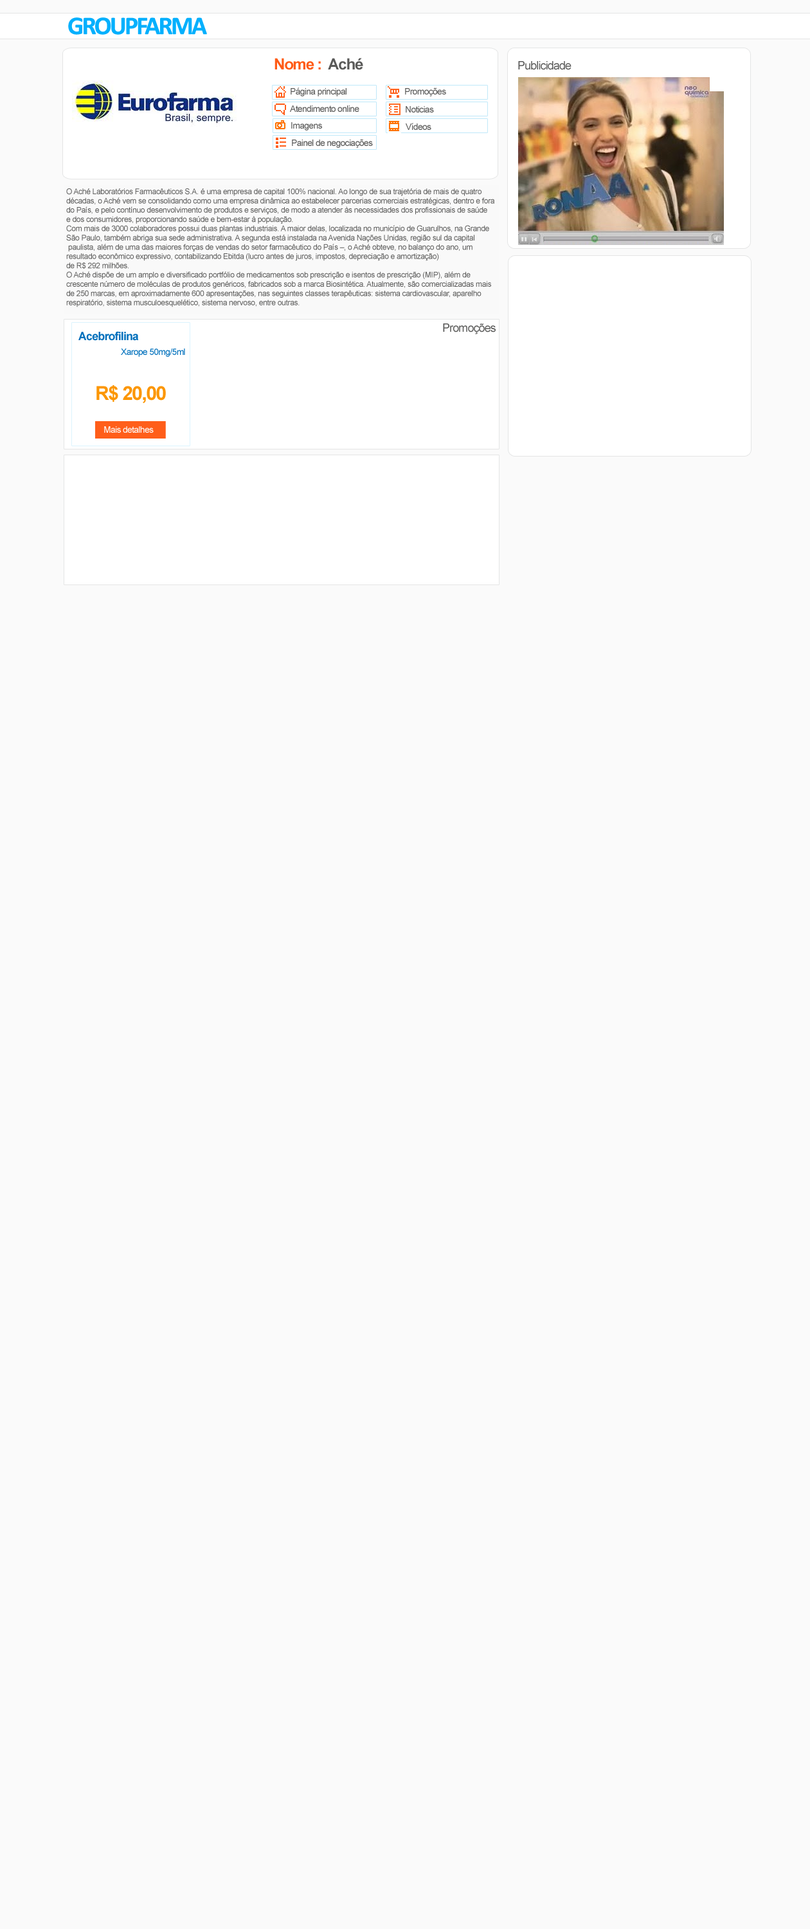
<style>
.page{position:relative;width:810px;height:1929px;background:#fafafa}
.page>*{position:absolute;margin:0}
.t1{font:25.7px "Calibri-Bold";letter-spacing:-0.075em;color:#04b0fd}
.t2{font:15.4px "Arial-BoldMT";letter-spacing:-0.05em;color:#ff5b16}
.t3{font:15.4px "Arial-BoldMT";letter-spacing:-0.05em;color:#595958}
.t4{font:11.6px "ArialMT";letter-spacing:-0.05em;color:#595958}
.t5{font:9px "ArialMT";letter-spacing:-0.05em;color:#595958}
.t6{font:7.7px "ArialMT";letter-spacing:-0.025em;color:#595958}
.t7{font:11.6px "Arial-BoldMT";letter-spacing:-0.05em;color:#0070bc}
.t8{font:9px "ArialMT";letter-spacing:-0.05em;color:#0070bc}
.t9{font:19.3px "Arial-BoldMT";letter-spacing:-0.05em;color:#fc9600}
.t10{font:9px "ArialMT";letter-spacing:-0.05em;color:#fdfdfd}
</style>
<div class="page">
<p class="t1" style="left:68px;top:17px;width:139px;height:18px">GROUPFARMA</p>
<p class="t2" style="left:274px;top:58px;width:89px;height:12px">Nome :<span class="t3">  Aché</span></p>
<p class="t4" style="left:518px;top:61px;width:54px;height:9px">Publicidade</p>
<p class="t5" style="left:291px;top:87px;width:55px;height:9px">Página principal</p>
<p class="t5" style="left:405px;top:87px;width:41px;height:9px">Promoções</p>
<p class="t5" style="left:290px;top:105px;width:69px;height:7px">Atendimento online</p>
<p class="t5" style="left:406px;top:106px;width:28px;height:7px">Noticias</p>
<p class="t5" style="left:291px;top:122px;width:31px;height:8px">Imagens</p>
<p class="t5" style="left:406px;top:123px;width:25px;height:7px">Vídeos</p>
<p class="t5" style="left:292px;top:139px;width:81px;height:9px">Painel de negociações</p>
<p class="t6" style="left:66px;top:188px;width:428px;height:119px">O Aché Laboratórios Farmacêuticos S.A. é uma empresa de capital 100% nacional. Ao longo de sua trajetória de mais de quatro <br>décadas, o Aché vem se consolidando como uma empresa dinâmica ao estabelecer parcerias comerciais estratégicas, dentro e fora <br>do País, e pelo contínuo desenvolvimento de produtos e serviços, de modo a atender às necessidades dos profissionais de saúde <br>e dos consumidores, proporcionando saúde e bem-estar à população.<br>Com mais de 3000 colaboradores possui duas plantas industriais. A maior delas, localizada no município de Guarulhos, na Grande <br>São Paulo, também abriga sua sede administrativa. A segunda está instalada na Avenida Nações Unidas, região sul da capital<br> paulista, além de uma das maiores forças de vendas do setor farmacêutico do País –, o Aché obteve, no balanço do ano, um <br>resultado econômico expressivo, contabilizando Ebitda (lucro antes de juros, impostos, depreciação e amortização) <br>de R$ 292 milhões.<br>O Aché dispõe de um amplo e diversificado portfólio de medicamentos sob prescrição e isentos de prescrição (MIP), além de <br>crescente número de moléculas de produtos genéricos, fabricados sob a marca Biosintética. Atualmente, são comercializadas mais <br>de 250 marcas, em aproximadamente 600 apresentações, nas seguintes classes terapêuticas: sistema cardiovascular, aparelho <br>respiratório, sistema musculoesquelético, sistema nervoso, entre outras.</p>
<p class="t4" style="left:443px;top:323px;width:53px;height:11px">Promoções</p>
<p class="t7" style="left:78px;top:331px;width:61px;height:10px">Acebrofilina</p>
<p class="t8" style="left:121px;top:348px;width:64px;height:9px">Xarope 50mg/5ml</p>
<p class="t9" style="left:96px;top:385px;width:70px;height:18px">R$ 20,00</p>
<p class="t10" style="left:104px;top:426px;width:50px;height:7px">Mais detalhes</p>
</div>
